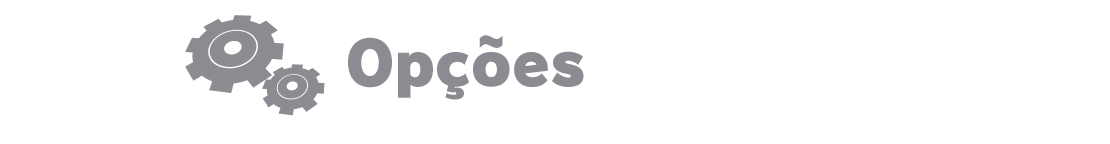
<style>
.page{position:relative;width:1110px;height:144px;background:#ffffff}
.page>*{position:absolute;margin:0}
.t1{font:60px "RodinPro-UB";color:#8b8c92}
</style>
<div class="page">
<p class="t1" style="left:348px;top:35px;width:236px;height:65px">Opções</p>
</div>
